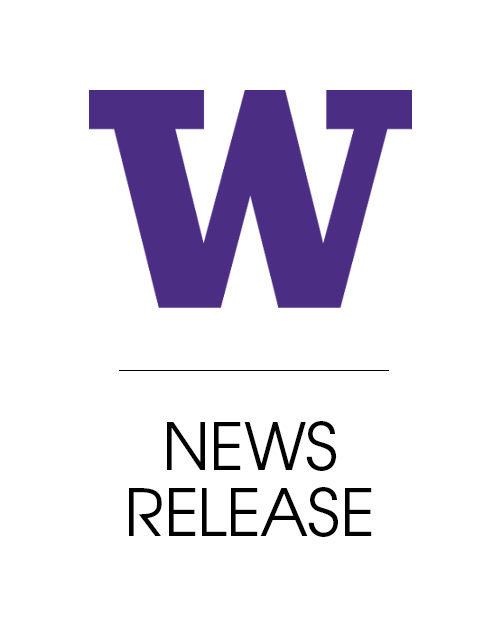
<style>
.page{position:relative;width:500px;height:625px;background:#ffffff}
.page>*{position:absolute;margin:0}
.t1{font:65px/66px "TeXGyreAdventor-Regular";color:#000000}
</style>
<div class="page">
<p class="t1" style="left:129px;top:421px;width:243px;height:116px;text-align:center">NEWS<br>RELEASE</p>
</div>
